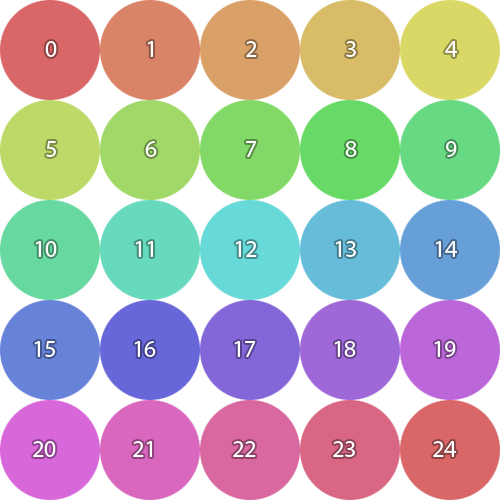
<style>
.page{position:relative;width:500px;height:500px;background:#ffffff}
.page>*{position:absolute;margin:0}
.t1{font:24px "MyriadPro-Regular";color:#ffffff}
</style>
<div class="page">
<p class="t1" style="left:45px;top:41px;width:12px;height:16px">0</p>
<p class="t1" style="left:147px;top:41px;width:6px;height:16px">1</p>
<p class="t1" style="left:246px;top:41px;width:11px;height:16px">2</p>
<p class="t1" style="left:346px;top:41px;width:10px;height:16px">3</p>
<p class="t1" style="left:445px;top:41px;width:13px;height:16px">4</p>
<p class="t1" style="left:46px;top:141px;width:10px;height:16px">5</p>
<p class="t1" style="left:145px;top:141px;width:12px;height:16px">6</p>
<p class="t1" style="left:246px;top:141px;width:11px;height:16px">7</p>
<p class="t1" style="left:345px;top:141px;width:12px;height:16px">8</p>
<p class="t1" style="left:446px;top:141px;width:11px;height:16px">9</p>
<p class="t1" style="left:35px;top:241px;width:22px;height:16px">10</p>
<p class="t1" style="left:135px;top:241px;width:18px;height:16px">11</p>
<p class="t1" style="left:235px;top:241px;width:22px;height:16px">12</p>
<p class="t1" style="left:335px;top:241px;width:21px;height:16px">13</p>
<p class="t1" style="left:435px;top:241px;width:23px;height:16px">14</p>
<p class="t1" style="left:34px;top:341px;width:21px;height:16px">15</p>
<p class="t1" style="left:134px;top:341px;width:22px;height:16px">16</p>
<p class="t1" style="left:234px;top:341px;width:22px;height:16px">17</p>
<p class="t1" style="left:334px;top:341px;width:22px;height:16px">18</p>
<p class="t1" style="left:434px;top:341px;width:22px;height:16px">19</p>
<p class="t1" style="left:33px;top:441px;width:23px;height:16px">20</p>
<p class="t1" style="left:133px;top:441px;width:19px;height:16px">21</p>
<p class="t1" style="left:233px;top:441px;width:23px;height:16px">22</p>
<p class="t1" style="left:333px;top:441px;width:22px;height:16px">23</p>
<p class="t1" style="left:433px;top:441px;width:24px;height:16px">24</p>
</div>
